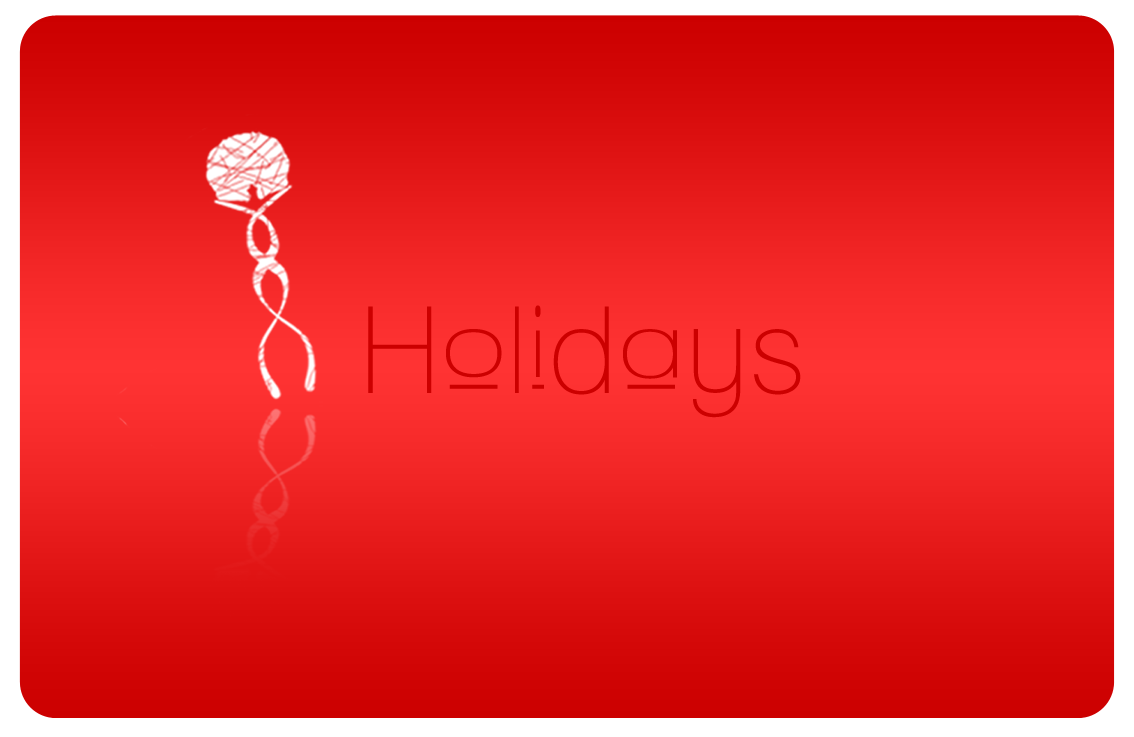
<style>
.page{position:relative;width:1134px;height:737px}
.page>*{position:absolute;margin:0}
.t1{font:120px "Lane-Upper";color:#cc0000}
</style>
<div class="page">
<p class="t1" style="left:368px;top:305px;width:433px;height:113px">Holidays</p>
</div>
